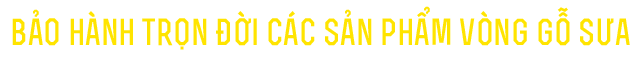
<style>
.page{position:relative;width:638px;height:60px;background:#ffffff}
.page>*{position:absolute;margin:0}
.t1{font:35.3px "SVN-Rex";color:#ffe400}
</style>
<div class="page">
<p class="t1" style="left:12px;top:6px;width:618px;height:44px">BẢO HÀNH TRỌN ĐỜI CÁC SẢN PHẨM VÒNG GỖ SƯA</p>
</div>
